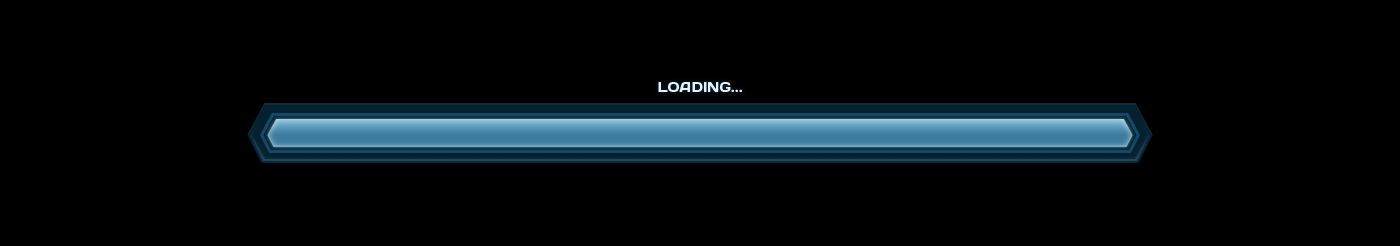
<style>
.page{position:relative;width:1400px;height:246px;background:#000000}
.page>*{position:absolute;margin:0}
.t1{font:14px "Days";color:#dff3fe;text-transform:uppercase}
</style>
<div class="page">
<p class="t1" style="left:658px;top:82px;width:84px;height:10px">Loading...</p>
</div>
